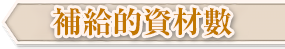
<style>
.page{position:relative;width:285px;height:49px}
.page>*{position:absolute;margin:0}
.t1{font:30px "RyuminPr6N-ExBold";color:#c27700}
</style>
<div class="page">
<p class="t1" style="left:52px;top:7px;width:180px;height:29px">補給的資材數</p>
</div>
